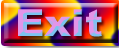
<style>
.page{position:relative;width:119px;height:48px}
.page>*{position:absolute;margin:0}
.t1{font:37.3px "Arial-Black";scale:1.09 1}
</style>
<div class="page">
<p class="t1" style="left:18px;top:9px;width:84px;height:28px">Exit</p>
</div>
